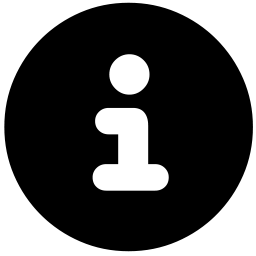
<style>
.page{position:relative;width:256px;height:256px;background:#000000}
.page>*{position:absolute;margin:0}
.t1{font:232.9px "SFPro-Black";color:#000000}
</style>
<div class="page">
<p class="t1" style="left:4px;top:2px;width:249px;height:250px">􀅵</p>
</div>
